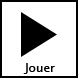
<style>
.page{position:relative;width:78px;height:78px;background:#ffffff}
.page>*{position:absolute;margin:0}
.t1{font:12px "LucidaSansUnicode";color:#000000}
</style>
<div class="page">
<p class="t1" style="left:23px;top:63px;width:32px;height:11px">Jouer</p>
</div>
